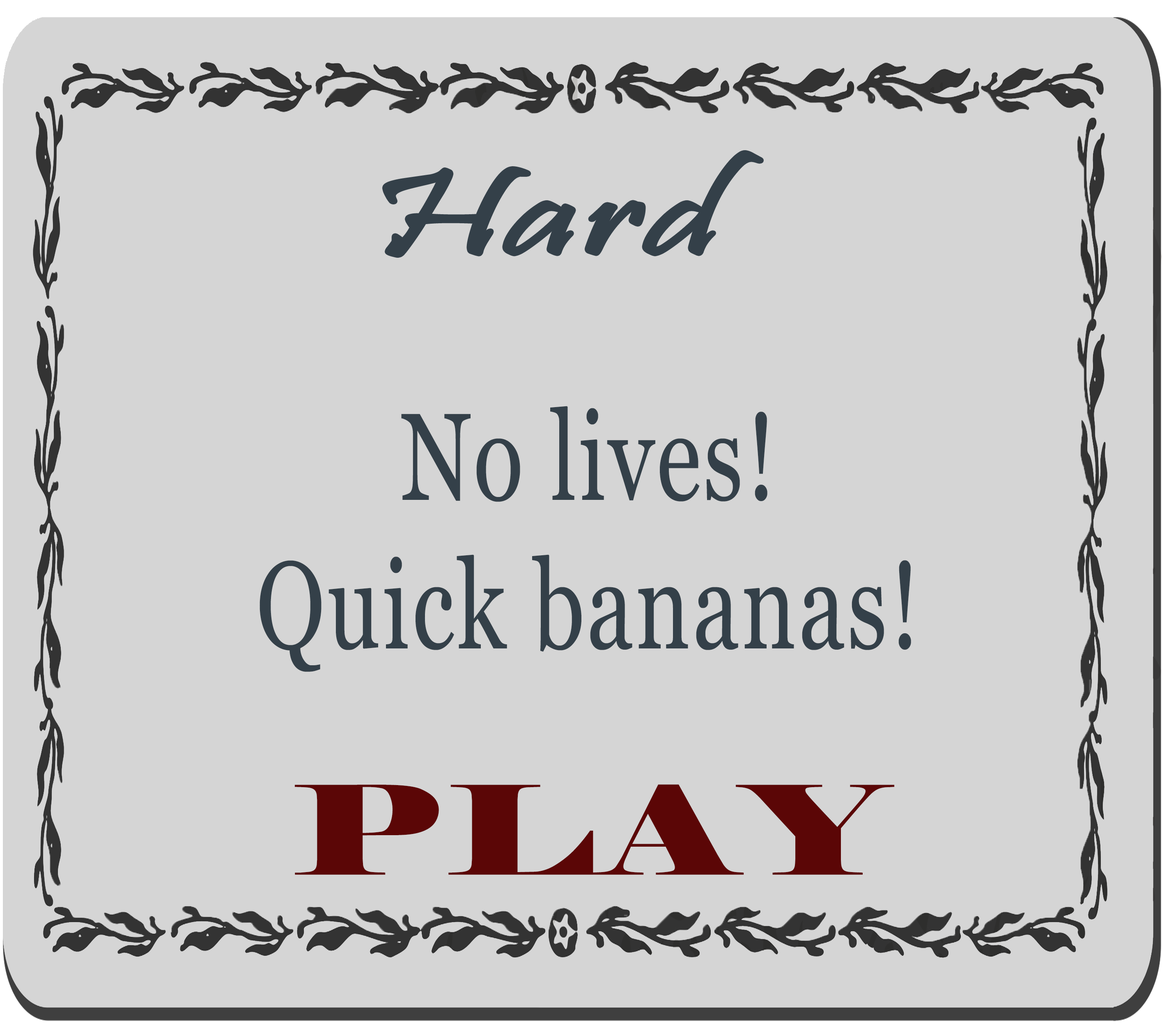
<style>
.page{position:relative;width:1162px;height:1026px;background:#d5d5d5}
.page>*{position:absolute;margin:0}
.t1{font:123.2px "Pristina-Regular";letter-spacing:0.025em;color:#344049;scale:1.5 1}
.t2{font:124px "Vani";letter-spacing:0.025em;color:#344049;scale:0.75 1}
.t3{font:123.2px "Elephant-Regular";letter-spacing:0.025em;color:#5b0606;scale:1.5 1}
</style>
<div class="page">
<p class="t1" style="left:384px;top:152px;width:378px;height:104px">Hard</p>
<p class="t2" style="left:259px;top:406px;width:652px;height:266px;text-align:center">No lives!<br>Quick bananas!</p>
<p class="t3" style="left:295px;top:785px;width:599px;height:90px">PLAY</p>
</div>
